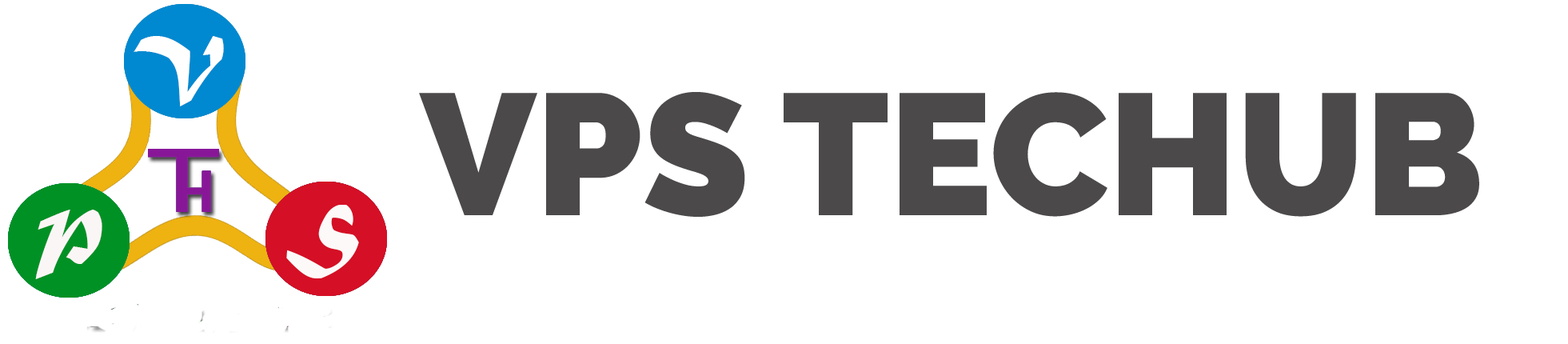
<style>
.page{position:relative;width:1568px;height:344px;background:#ffffff}
.page>*{position:absolute;margin:0}
.t1{font:171.8px "Raleway-Black";color:#4b4949}
</style>
<div class="page">
<p class="t1" style="left:419px;top:92px;width:1060px;height:125px">VPS TECHUB</p>
</div>
